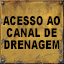
<style>
.page{position:relative;width:64px;height:64px}
.page>*{position:absolute;margin:0}
.t1{font:12.3px/12.3px "Arial-Black";letter-spacing:0.05em;color:#050302;text-transform:uppercase;scale:0.68 1}
</style>
<div class="page">
<p class="t1" style="left:3px;top:16px;width:57px;height:34px;text-align:center">acesso ao<br>canal de<br>drenagem</p>
</div>
